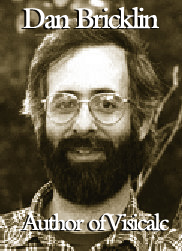
<style>
.page{position:relative;width:182px;height:251px}
.page>*{position:absolute;margin:0}
.t1{font:31.2px "BemboMT-SemiBold";letter-spacing:-0.08em;color:#ffffff;scale:0.95 1}
.t2{font:25px "BemboMT-SemiBold";letter-spacing:-0.08em;color:#ffffff;scale:0.95 1}
</style>
<div class="page">
<p class="t1" style="left:23px;top:7px;width:136px;height:22px">Dan Bricklin</p>
<p class="t2" style="left:22px;top:213px;width:147px;height:18px">Author of Visicalc</p>
</div>
